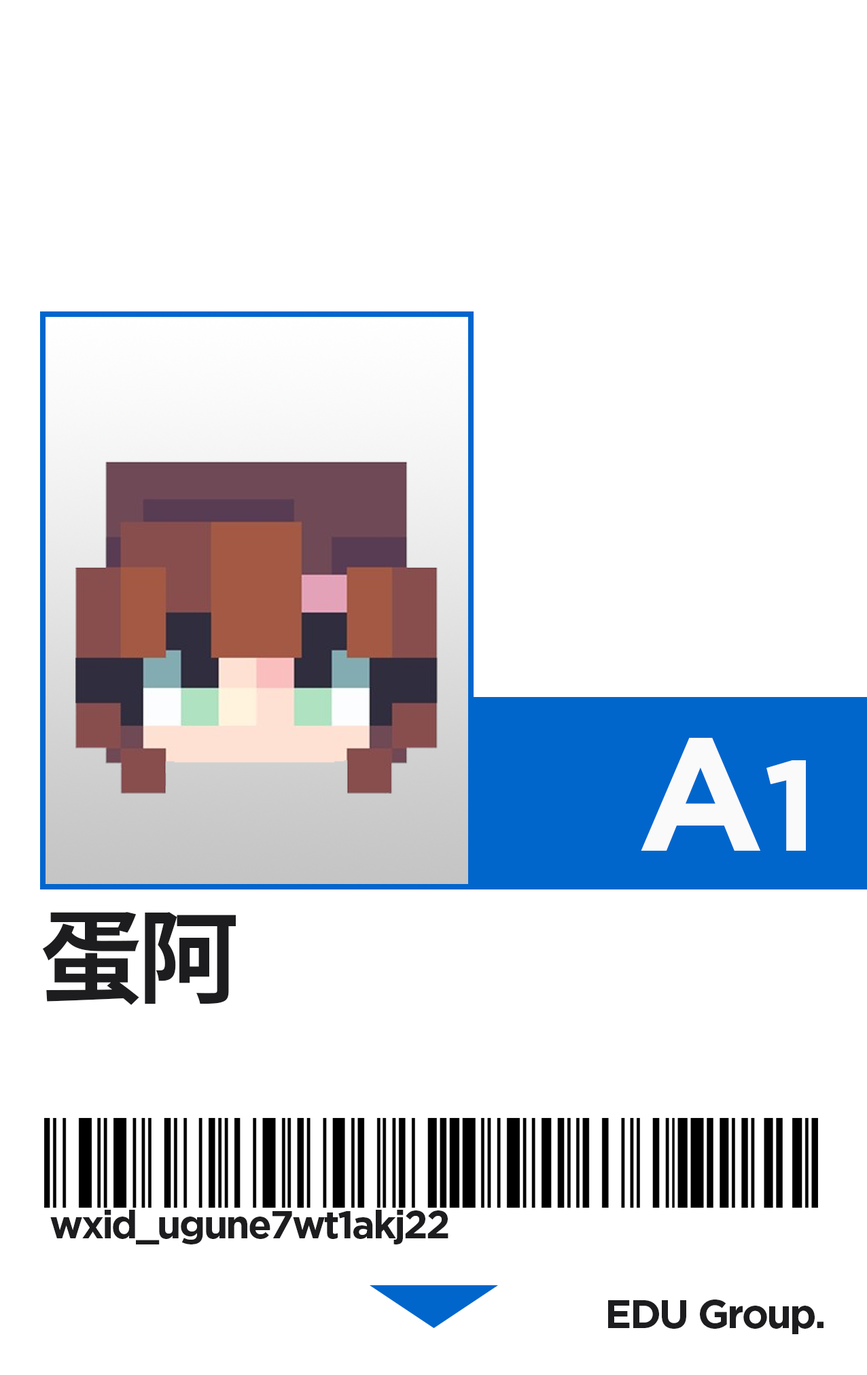
<style>
.page{position:relative;width:867px;height:1375px;background:#ffffff}
.page>*{position:absolute;margin:0}
.t1{font:160.6px "Gotham-Bold";color:#fafafa}
.t2{font:128.5px "Gotham-Bold";color:#fafafa}
.t3{font:102px "SourceHanSansCN-Bold";letter-spacing:-0.05em;color:#1d1d1f}
.t4{font:38.8px "Gotham-Bold";letter-spacing:-0.05em;color:#1d1d1f}
.t5{font:40.1px "Gotham-Bold";letter-spacing:-0.05em;color:#1d1d1f}
</style>
<div class="page">
<p class="t1" style="left:641px;top:738px;width:165px;height:112px">A<span class="t2">1</span></p>
<p class="t3" style="left:42px;top:912px;width:194px;height:93px">蛋阿</p>
<p class="t4" style="left:50px;top:1209px;width:399px;height:35px">wxid_ugune7wt1akj22</p>
<p class="t5" style="left:608px;top:1299px;width:216px;height:35px">EDU Group.</p>
</div>
